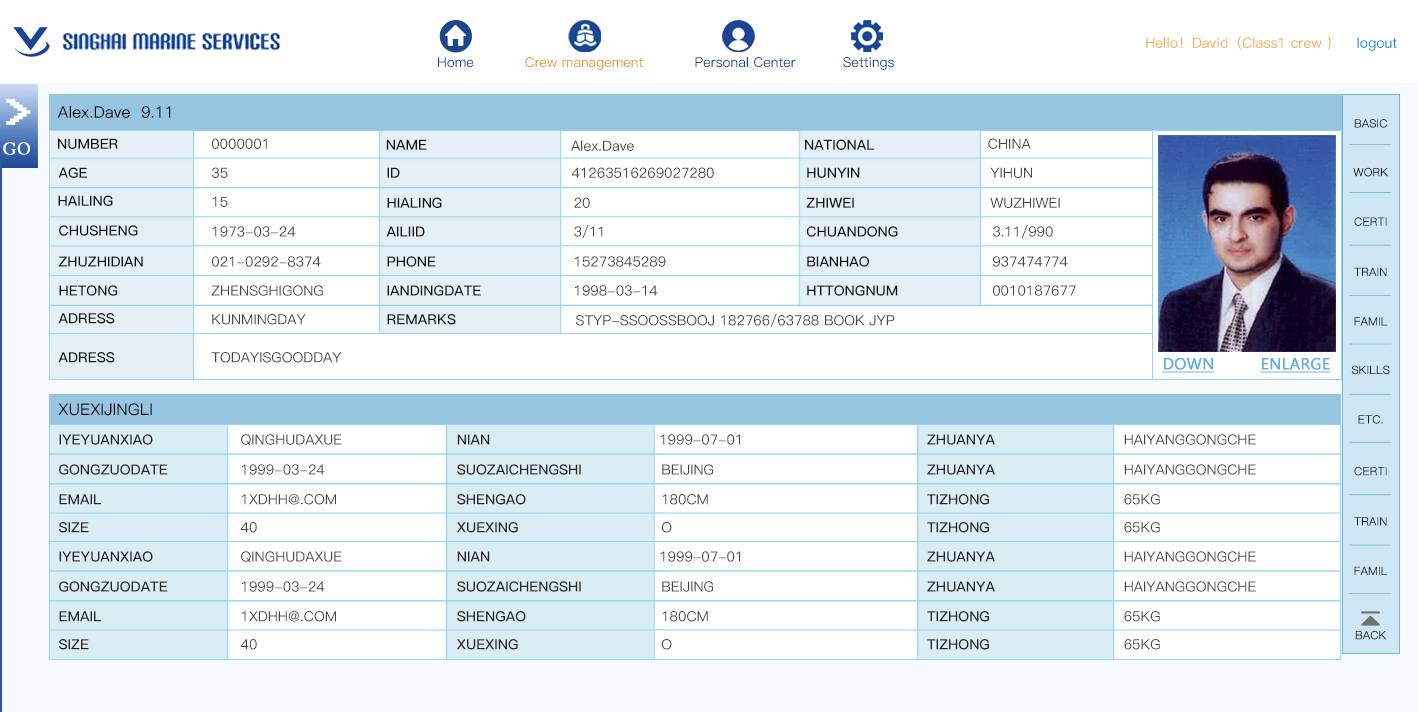
<style>
.page{position:relative;width:1418px;height:712px;background:#ffffff}
.page>*{position:absolute;margin:0}
.t1{font:14px "PingFang-SC-Medium";color:#f3ac47}
.t2{font:14px "PingFang-SC-Medium";color:#0088cc}
.t3{font:13.7px "PingFang-SC-Medium";color:#1a4692}
.t4{font:13.7px "PingFang-SC-Medium";color:#e29b3a}
.t5{font:44.1px "Terminal";color:#ffffff;font-weight:bold;scale:1.09 1}
.t6{font:16px "PingFang-SC-Medium";color:#000000}
.t7{font:11.2px "PingFang-SC-Regular";color:#1b1b1b;font-weight:bold}
.t8{font:16.7px "ACaslonPro-Regular";color:#ffffff;font-weight:bold}
.t9{font:14px "PingFang-SC-Bold";color:#111111}
.t10{font:14px "PingFang-SC-Medium";color:#454545}
.t11{font:16px "SegoeUI";color:#60aee0;font-weight:bold;text-decoration:underline}
.t12{font:14px "PingFang-SC-Bold";color:#272727}
</style>
<div class="page">
<p class="t1" style="left:1146px;top:36px;width:185px;height:14px">Hello！David（Class1 crew ）</p>
<p class="t2" style="left:1357px;top:37px;width:40px;height:14px">logout</p>
<p class="t3" style="left:438px;top:57px;width:36px;height:11px">Home</p>
<p class="t4" style="left:525px;top:57px;width:118px;height:13px">Crew management</p>
<p class="t3" style="left:695px;top:57px;width:101px;height:11px">Personal Center</p>
<p class="t3" style="left:843px;top:57px;width:51px;height:13px">Settings</p>
<p class="t5" style="left:6px;top:99px;width:25px;height:26px">&gt;</p>
<p class="t6" style="left:57px;top:106px;width:114px;height:12px">Alex.Dave  9.11</p>
<p class="t7" style="left:1354px;top:119px;width:33px;height:9px">BASIC</p>
<p class="t8" style="left:3px;top:142px;width:27px;height:13px">GO</p>
<p class="t9" style="left:58px;top:138px;width:60px;height:11px">NUMBER</p>
<p class="t10" style="left:212px;top:138px;width:55px;height:11px">0000001</p>
<p class="t9" style="left:386px;top:139px;width:41px;height:11px">NAME</p>
<p class="t10" style="left:571px;top:140px;width:63px;height:11px">Alex.Dave</p>
<p class="t9" style="left:805px;top:139px;width:70px;height:11px">NATIONAL</p>
<p class="t10" style="left:988px;top:138px;width:43px;height:11px">CHINA</p>
<p class="t9" style="left:58px;top:167px;width:29px;height:11px">AGE</p>
<p class="t10" style="left:212px;top:167px;width:16px;height:11px">35</p>
<p class="t9" style="left:387px;top:167px;width:13px;height:11px">ID</p>
<p class="t10" style="left:571px;top:167px;width:143px;height:11px">41263516269027280</p>
<p class="t9" style="left:807px;top:167px;width:53px;height:11px">HUNYIN</p>
<p class="t10" style="left:990px;top:167px;width:42px;height:11px">YIHUN</p>
<p class="t7" style="left:1353px;top:167px;width:35px;height:10px">WORK</p>
<p class="t9" style="left:58px;top:195px;width:55px;height:11px">HAILING</p>
<p class="t10" style="left:212px;top:196px;width:16px;height:11px">15</p>
<p class="t9" style="left:387px;top:197px;width:55px;height:11px">HIALING</p>
<p class="t10" style="left:574px;top:197px;width:16px;height:11px">20</p>
<p class="t9" style="left:806px;top:197px;width:48px;height:11px">ZHIWEI</p>
<p class="t10" style="left:990px;top:197px;width:70px;height:11px">WUZHIWEI</p>
<p class="t7" style="left:1354px;top:217px;width:33px;height:9px">CERTI</p>
<p class="t9" style="left:59px;top:225px;width:79px;height:11px">CHUSHENG</p>
<p class="t10" style="left:212px;top:226px;width:84px;height:11px">1973-03-24</p>
<p class="t9" style="left:386px;top:226px;width:39px;height:11px">AILIID</p>
<p class="t10" style="left:574px;top:225px;width:29px;height:13px">3/11</p>
<p class="t9" style="left:806px;top:226px;width:92px;height:11px">CHUANDONG</p>
<p class="t10" style="left:993px;top:225px;width:60px;height:13px">3.11/990</p>
<p class="t9" style="left:58px;top:256px;width:85px;height:11px">ZHUZHIDIAN</p>
<p class="t10" style="left:212px;top:256px;width:109px;height:11px">021-0292-8374</p>
<p class="t9" style="left:387px;top:256px;width:49px;height:11px">PHONE</p>
<p class="t10" style="left:575px;top:256px;width:91px;height:11px">15273845289</p>
<p class="t9" style="left:807px;top:256px;width:62px;height:11px">BIANHAO</p>
<p class="t10" style="left:993px;top:256px;width:75px;height:11px">937474774</p>
<p class="t7" style="left:1354px;top:267px;width:33px;height:9px">TRAIN</p>
<p class="t9" style="left:59px;top:285px;width:59px;height:11px">HETONG</p>
<p class="t10" style="left:211px;top:285px;width:112px;height:11px">ZHENSGHIGONG</p>
<p class="t9" style="left:387px;top:285px;width:94px;height:11px">IANDINGDATE</p>
<p class="t10" style="left:575px;top:285px;width:83px;height:11px">1998-03-14</p>
<p class="t9" style="left:807px;top:285px;width:91px;height:11px">HTTONGNUM</p>
<p class="t10" style="left:993px;top:285px;width:83px;height:11px">0010187677</p>
<p class="t9" style="left:58px;top:313px;width:57px;height:11px">ADRESS</p>
<p class="t10" style="left:212px;top:314px;width:94px;height:11px">KUNMINGDAY</p>
<p class="t9" style="left:387px;top:314px;width:69px;height:11px">REMARKS</p>
<p class="t10" style="left:576px;top:313px;width:319px;height:14px">STYP-SSOOSSBOOJ 182766/63788 BOOK JYP</p>
<p class="t7" style="left:1354px;top:317px;width:34px;height:9px">FAMIL</p>
<p class="t9" style="left:58px;top:352px;width:57px;height:11px">ADRESS</p>
<p class="t10" style="left:211px;top:352px;width:131px;height:11px">TODAYISGOODDAY</p>
<p class="t11" style="left:1162px;top:357px;width:53px;height:16px">DOWN</p>
<p class="t11" style="left:1260px;top:357px;width:71px;height:16px">ENLARGE</p>
<p class="t7" style="left:1351px;top:365px;width:39px;height:10px">SKILLS</p>
<p class="t6" style="left:58px;top:403px;width:94px;height:13px">XUEXIJINGLI</p>
<p class="t7" style="left:1358px;top:415px;width:25px;height:9px">ETC.</p>
<p class="t12" style="left:59px;top:434px;width:94px;height:11px">IYEYUANXIAO</p>
<p class="t10" style="left:241px;top:434px;width:101px;height:12px">QINGHUDAXUE</p>
<p class="t12" style="left:457px;top:434px;width:33px;height:11px">NIAN</p>
<p class="t10" style="left:660px;top:434px;width:80px;height:11px">1999-07-01</p>
<p class="t12" style="left:927px;top:434px;width:68px;height:11px">ZHUANYA</p>
<p class="t10" style="left:1124px;top:434px;width:132px;height:11px">HAIYANGGONGCHE</p>
<p class="t12" style="left:59px;top:464px;width:109px;height:11px">GONGZUODATE</p>
<p class="t10" style="left:242px;top:464px;width:83px;height:11px">1999-03-24</p>
<p class="t12" style="left:457px;top:464px;width:124px;height:11px">SUOZAICHENGSHI</p>
<p class="t10" style="left:662px;top:464px;width:51px;height:11px">BEIJING</p>
<p class="t12" style="left:927px;top:464px;width:68px;height:11px">ZHUANYA</p>
<p class="t10" style="left:1124px;top:464px;width:132px;height:11px">HAIYANGGONGCHE</p>
<p class="t7" style="left:1354px;top:466px;width:33px;height:10px">CERTI</p>
<p class="t12" style="left:59px;top:494px;width:42px;height:11px">EMAIL</p>
<p class="t10" style="left:242px;top:494px;width:94px;height:11px">1XDHH@.COM</p>
<p class="t12" style="left:457px;top:494px;width:69px;height:11px">SHENGAO</p>
<p class="t10" style="left:662px;top:494px;width:46px;height:11px">180CM</p>
<p class="t12" style="left:927px;top:494px;width:62px;height:11px">TIZHONG</p>
<p class="t10" style="left:1124px;top:494px;width:36px;height:11px">65KG</p>
<p class="t7" style="left:1354px;top:517px;width:33px;height:9px">TRAIN</p>
<p class="t12" style="left:59px;top:522px;width:30px;height:11px">SIZE</p>
<p class="t10" style="left:240px;top:522px;width:17px;height:11px">40</p>
<p class="t12" style="left:457px;top:522px;width:61px;height:11px">XUEXING</p>
<p class="t10" style="left:661px;top:522px;width:11px;height:11px">O</p>
<p class="t12" style="left:927px;top:522px;width:62px;height:11px">TIZHONG</p>
<p class="t10" style="left:1124px;top:522px;width:36px;height:11px">65KG</p>
<p class="t12" style="left:59px;top:551px;width:94px;height:11px">IYEYUANXIAO</p>
<p class="t10" style="left:241px;top:551px;width:101px;height:12px">QINGHUDAXUE</p>
<p class="t12" style="left:457px;top:551px;width:33px;height:11px">NIAN</p>
<p class="t10" style="left:660px;top:551px;width:80px;height:11px">1999-07-01</p>
<p class="t12" style="left:927px;top:551px;width:68px;height:11px">ZHUANYA</p>
<p class="t10" style="left:1124px;top:551px;width:132px;height:11px">HAIYANGGONGCHE</p>
<p class="t7" style="left:1354px;top:566px;width:34px;height:9px">FAMIL</p>
<p class="t12" style="left:59px;top:581px;width:109px;height:11px">GONGZUODATE</p>
<p class="t10" style="left:242px;top:581px;width:83px;height:11px">1999-03-24</p>
<p class="t12" style="left:457px;top:581px;width:124px;height:11px">SUOZAICHENGSHI</p>
<p class="t10" style="left:662px;top:581px;width:51px;height:11px">BEIJING</p>
<p class="t12" style="left:927px;top:581px;width:68px;height:11px">ZHUANYA</p>
<p class="t10" style="left:1124px;top:581px;width:132px;height:11px">HAIYANGGONGCHE</p>
<p class="t12" style="left:59px;top:611px;width:42px;height:11px">EMAIL</p>
<p class="t10" style="left:242px;top:611px;width:94px;height:11px">1XDHH@.COM</p>
<p class="t12" style="left:457px;top:611px;width:69px;height:11px">SHENGAO</p>
<p class="t10" style="left:662px;top:611px;width:46px;height:11px">180CM</p>
<p class="t12" style="left:927px;top:611px;width:62px;height:11px">TIZHONG</p>
<p class="t10" style="left:1124px;top:611px;width:36px;height:11px">65KG</p>
<p class="t7" style="left:1355px;top:630px;width:32px;height:10px">BACK</p>
<p class="t12" style="left:59px;top:639px;width:30px;height:11px">SIZE</p>
<p class="t10" style="left:240px;top:639px;width:17px;height:11px">40</p>
<p class="t12" style="left:457px;top:639px;width:61px;height:11px">XUEXING</p>
<p class="t10" style="left:661px;top:639px;width:11px;height:11px">O</p>
<p class="t12" style="left:927px;top:639px;width:62px;height:11px">TIZHONG</p>
<p class="t10" style="left:1124px;top:639px;width:36px;height:11px">65KG</p>
</div>
